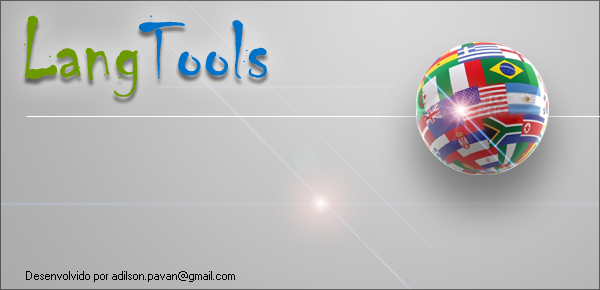
<style>
.page{position:relative;width:600px;height:290px}
.page>*{position:absolute;margin:0}
.t1{font:87px "Chiller-Regular";color:#0072ca}
.t2{font:87px "Chiller-Regular";color:#6c9900}
.t3{font:11px "MicrosoftSansSerif";color:#000000}
</style>
<div class="page">
<p class="t1" style="left:23px;top:15px;width:244px;height:82px"><span class="t2">Lang</span>Tools</p>
<p class="t3" style="left:26px;top:271px;width:209px;height:11px">Desenvolvido por adilson.pavan@gmail.com</p>
</div>
